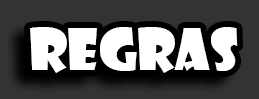
<style>
.page{position:relative;width:259px;height:99px;background:#333333}
.page>*{position:absolute;margin:0}
.t1{font:56.2px "ShowcardGothic-Reg";color:#ffffff}
</style>
<div class="page">
<p class="t1" style="left:30px;top:27px;width:208px;height:46px">regras</p>
</div>
